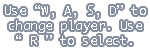
<style>
.page{position:relative;width:150px;height:50px;background:#ffffff}
.page>*{position:absolute;margin:0}
.t1{font:12.5px "Ayuthaya";color:#ffffff}
</style>
<div class="page">
<p class="t1" style="left:5px;top:5px;width:141px;height:40px;text-align:center">Use “W, A, S, D” to change player. Use<br>“ R ” to select.</p>
</div>
